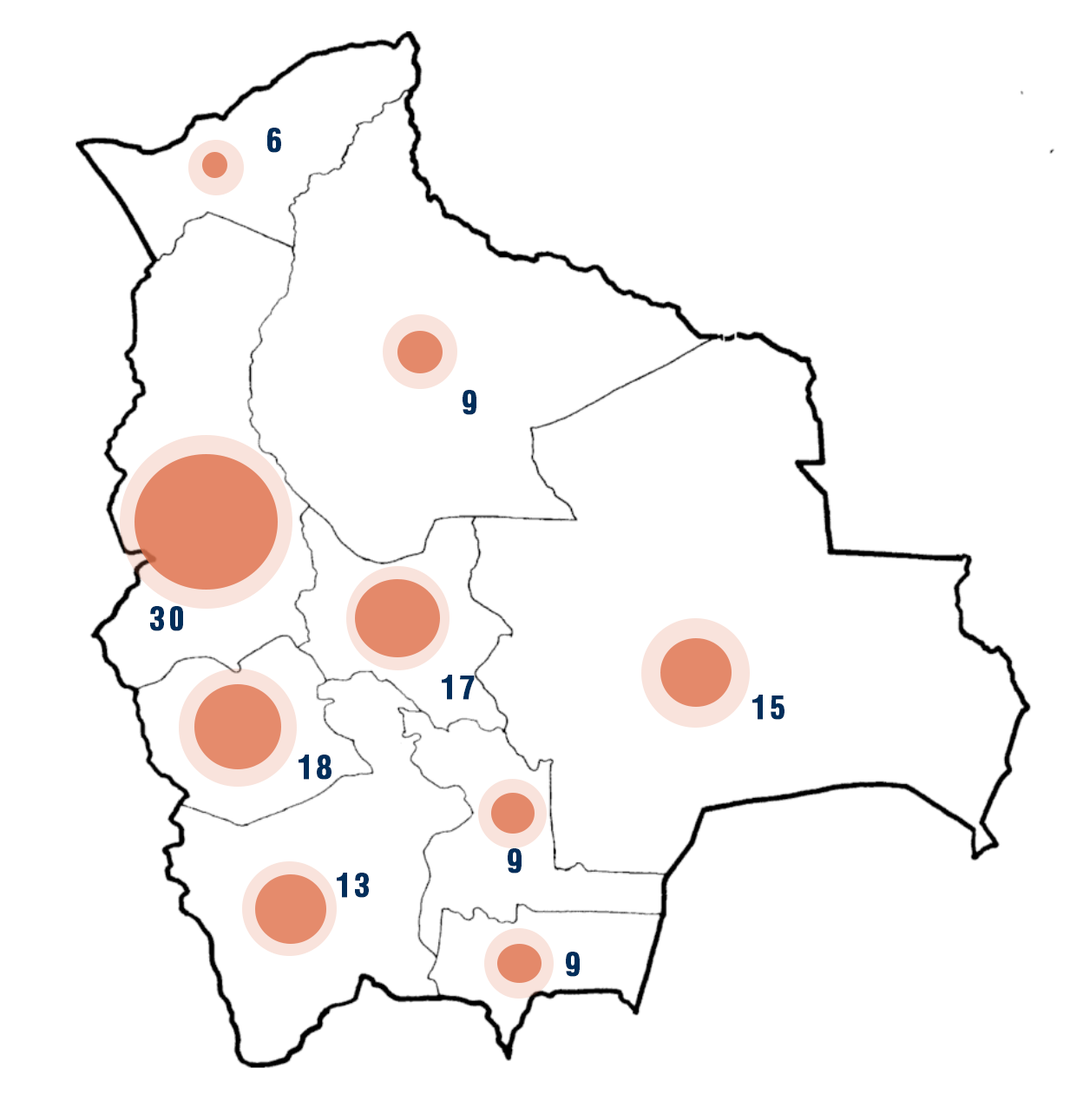
<style>
.page{position:relative;width:1083px;height:1101px;background:#ffffff}
.page>*{position:absolute;margin:0}
.t1{font:31.3px "Helvetica-Condensed-Bold";letter-spacing:0.1em;color:#002e5b;font-weight:bold}
</style>
<div class="page">
<p class="t1" style="left:267px;top:128px;width:14px;height:25px">6</p>
<p class="t1" style="left:463px;top:390px;width:14px;height:25px">9</p>
<p class="t1" style="left:150px;top:606px;width:33px;height:25px">30</p>
<p class="t1" style="left:442px;top:674px;width:33px;height:26px">17</p>
<p class="t1" style="left:753px;top:694px;width:32px;height:26px">15</p>
<p class="t1" style="left:299px;top:754px;width:33px;height:26px">18</p>
<p class="t1" style="left:508px;top:848px;width:14px;height:25px">9</p>
<p class="t1" style="left:337px;top:872px;width:32px;height:26px">13</p>
<p class="t1" style="left:566px;top:951px;width:14px;height:26px">9</p>
</div>
